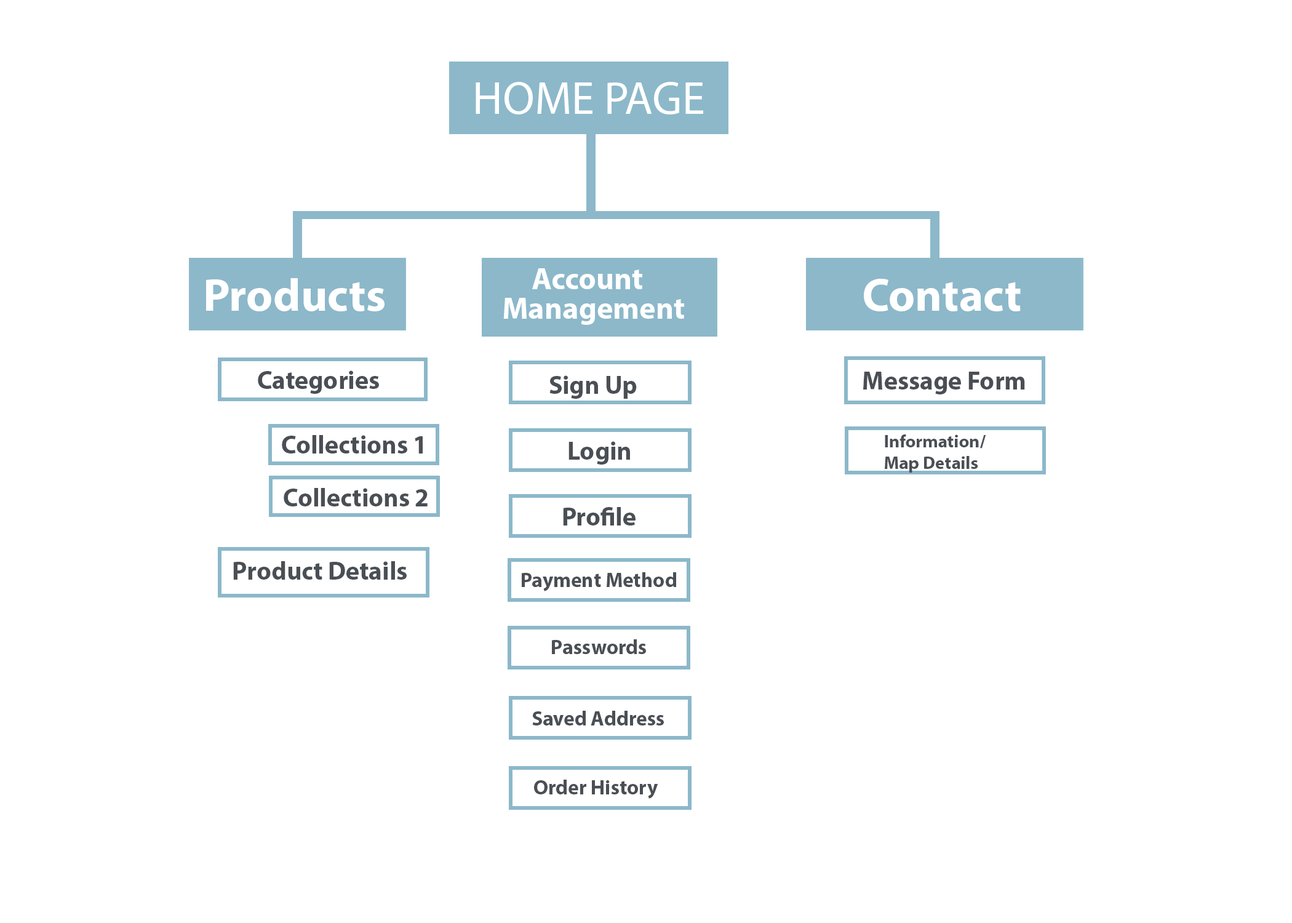
<style>
.page{position:relative;width:1292px;height:923px;background:#ffffff}
.page>*{position:absolute;margin:0}
.t1{font:46.1px "MyriadPro-Regular";color:#ffffff}
.t2{font:30.8px "MyriadPro-Bold";color:#ffffff}
.t3{font:46.1px "MyriadPro-Bold";color:#ffffff}
.t4{font:25.6px "MyriadPro-Bold";color:#4a4f55}
.t5{font:17.9px "MyriadPro-Bold";color:#4a4f55}
.t6{font:20.5px "MyriadPro-Bold";color:#4a4f55}
</style>
<div class="page">
<p class="t1" style="left:476px;top:82px;width:227px;height:32px">HOME PAGE</p>
<p class="t2" style="left:532px;top:268px;width:110px;height:21px">Account</p>
<p class="t3" style="left:206px;top:278px;width:179px;height:33px">Products</p>
<p class="t3" style="left:864px;top:279px;width:157px;height:32px">Contact</p>
<p class="t2" style="left:503px;top:298px;width:181px;height:27px">Management</p>
<p class="t4" style="left:258px;top:370px;width:121px;height:24px">Categories</p>
<p class="t4" style="left:549px;top:375px;width:88px;height:24px">Sign Up</p>
<p class="t4" style="left:863px;top:372px;width:162px;height:22px">Message Form</p>
<p class="t4" style="left:282px;top:435px;width:141px;height:18px">Collections 1</p>
<p class="t5" style="left:885px;top:434px;width:101px;height:39px">Information/<br>Map Details</p>
<p class="t4" style="left:569px;top:441px;width:61px;height:24px">Login</p>
<p class="t4" style="left:284px;top:488px;width:144px;height:18px">Collections 2</p>
<p class="t4" style="left:563px;top:507px;width:73px;height:18px">Profile</p>
<p class="t4" style="left:233px;top:561px;width:174px;height:19px">Product Details</p>
<p class="t6" style="left:522px;top:572px;width:154px;height:19px">Payment Method</p>
<p class="t6" style="left:552px;top:639px;width:94px;height:15px">Passwords</p>
<p class="t6" style="left:532px;top:711px;width:132px;height:14px">Saved Address</p>
<p class="t6" style="left:534px;top:780px;width:124px;height:19px">Order History</p>
</div>
